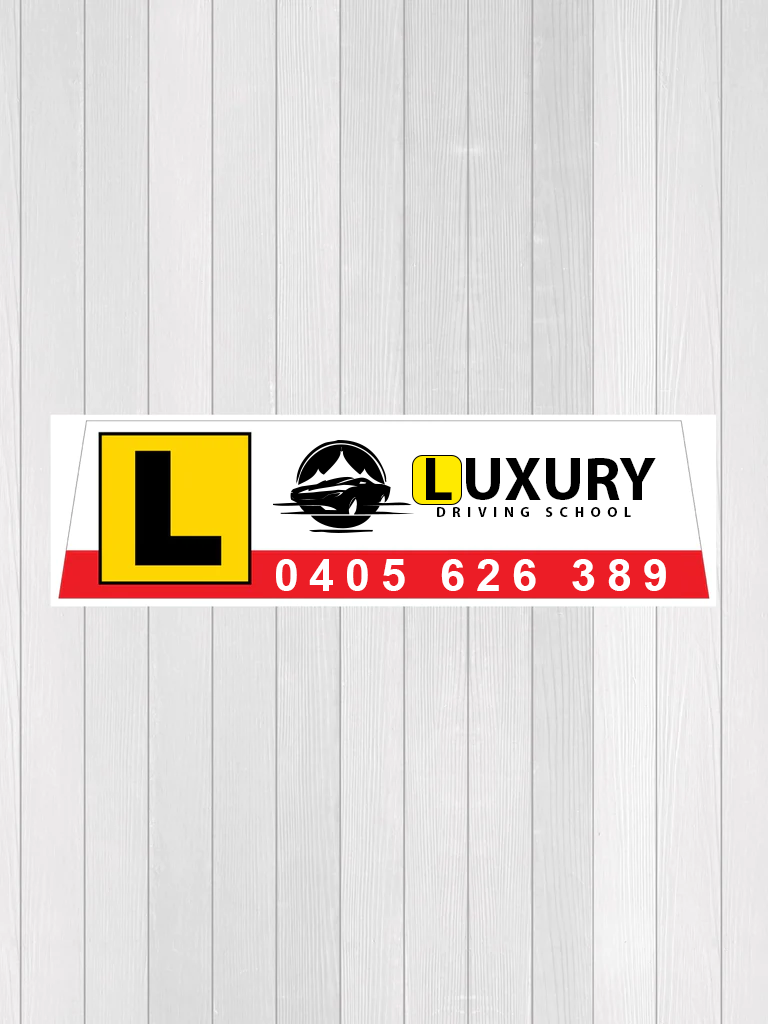
<style>
.page{position:relative;width:768px;height:1024px}
.page>*{position:absolute;margin:0}
.t1{font:61.5px "MyriadPro-Bold";color:#000000}
.t2{font:61.5px "MyriadPro-Bold";letter-spacing:0.14em;color:#000000}
.t3{font:14.1px "MyriadPro-Bold";letter-spacing:0.46em;color:#000000}
.t4{font:45px "Arial-BoldMT";letter-spacing:0.24em;color:#ffffff}
</style>
<div class="page">
<p class="t1" style="left:426px;top:458px;width:230px;height:42px"><span class="t2">L</span>UXURY</p>
<p class="t3" style="left:437px;top:507px;width:194px;height:10px">DRIVING SCHOOL</p>
<p class="t4" style="left:276px;top:559px;width:390px;height:32px">0405 626 389</p>
</div>
